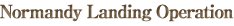
<style>
.page{position:relative;width:234px;height:26px;background:#ffffff}
.page>*{position:absolute;margin:0}
.t1{font:18px "RyuminPro-ExBold";letter-spacing:-0.08em;color:#6a563e;font-weight:bold}
</style>
<div class="page">
<p class="t1" style="left:0px;top:4px;width:234px;height:18px">Normandy Landing Operation</p>
</div>
